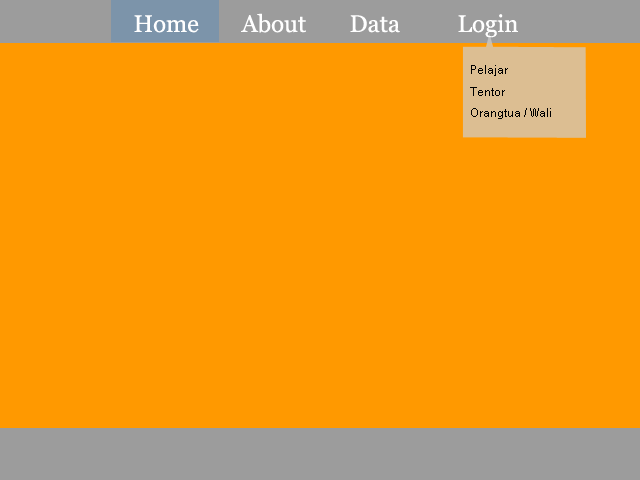
<style>
.page{position:relative;width:640px;height:480px;background:#ff9900}
.page>*{position:absolute;margin:0}
.t1{font:24px "Georgia";color:#ffffff}
.t2{font:18px "CordiaNew";color:#000000}
</style>
<div class="page">
<p class="t1" style="left:134px;top:13px;width:384px;height:25px">Home  About  Data  Login</p>
<p class="t2" style="left:470px;top:65px;width:81px;height:54px">Pelajar<br>Tentor<br>Orangtua / Wali</p>
</div>
